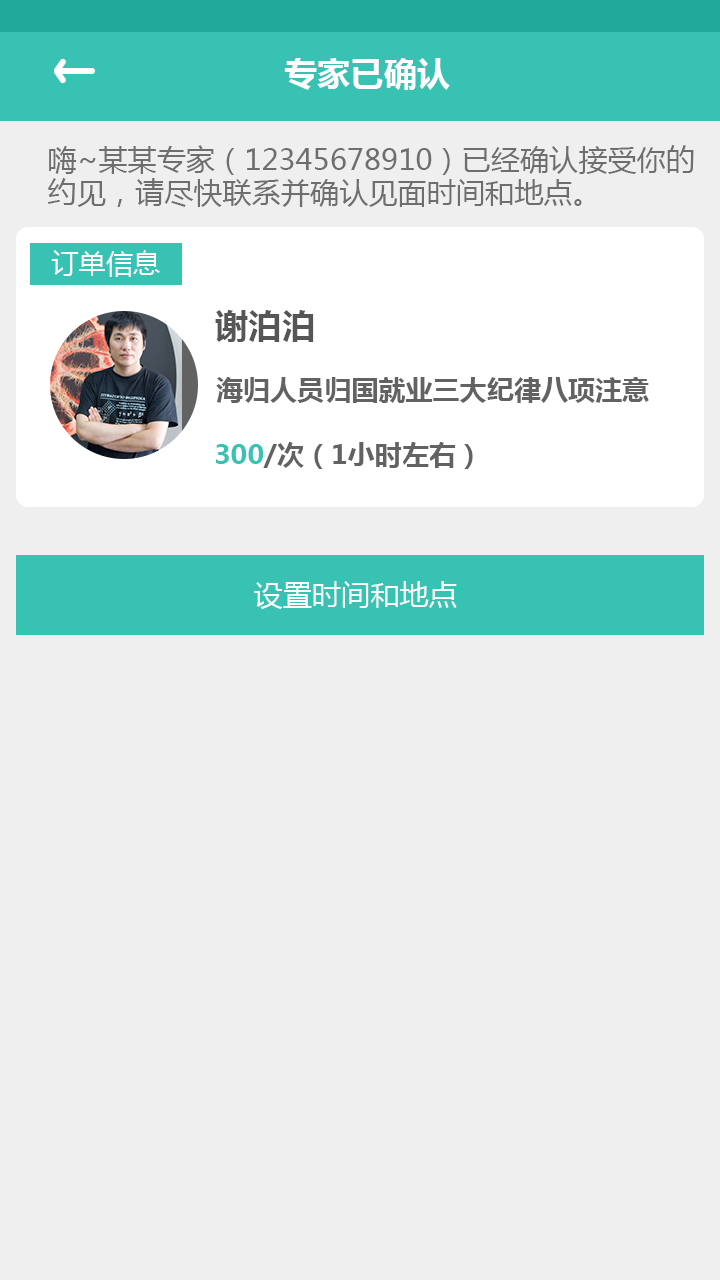
<style>
.page{position:relative;width:720px;height:1280px;background:#efefef}
.page>*{position:absolute;margin:0}
.t1{font:33.3px "MicrosoftYaHei-Bold";color:#fefefe}
.t2{font:29.2px/33.3px "MicrosoftYaHei";color:#6e6e6e}
.t3{font:27.1px "MicrosoftYaHei";color:#fefefe}
.t4{font:33.3px "MicrosoftYaHei-Bold";color:#565656}
.t5{font:27.1px "MicrosoftYaHei-Bold";color:#626262}
.t6{font:27.1px "MicrosoftYaHei-Bold";color:#38c2b3}
.t7{font:29.2px "MicrosoftYaHei";color:#fefefe}
</style>
<div class="page">
<p class="t1" style="left:284px;top:58px;width:166px;height:32px">专家已确认</p>
<p class="t2" style="left:48px;top:145px;width:646px;height:62px">嗨~某某专家（12345678910）已经确认接受你的<br>约见，请尽快联系并确认见面时间和地点。</p>
<p class="t3" style="left:51px;top:250px;width:109px;height:27px">订单信息</p>
<p class="t4" style="left:215px;top:310px;width:99px;height:32px">谢泊泊</p>
<p class="t5" style="left:216px;top:377px;width:433px;height:26px">海归人员归国就业三大纪律八项注意</p>
<p class="t5" style="left:216px;top:442px;width:257px;height:27px"><span class="t6">300</span>/次（1小时左右）</p>
<p class="t7" style="left:254px;top:581px;width:203px;height:28px">设置时间和地点</p>
</div>
